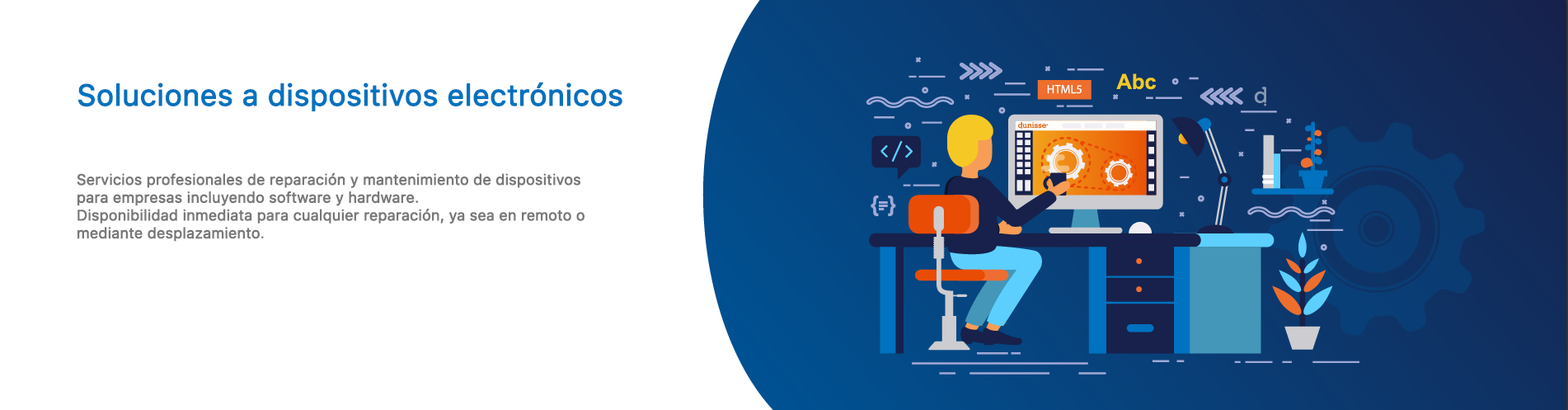
<style>
.page{position:relative;width:1568px;height:410px;background:#ffffff}
.page>*{position:absolute;margin:0}
.t1{font:29.7px "SFProText-Regular";color:#0072bf;font-weight:bold}
.t2{font:14.8px "SFProText-Regular";color:#787878;font-weight:bold}
</style>
<div class="page">
<p class="t1" style="left:78px;top:82px;width:544px;height:29px">Soluciones a dispositivos electrónicos</p>
<p class="t2" style="left:77px;top:172px;width:507px;height:70px">Servicios profesionales de reparación y mantenimiento de dispositivos <br>para empresas incluyendo software y hardware. <br>Disponibilidad inmediata para cualquier reparación, ya sea en remoto o <br>mediante desplazamiento.</p>
</div>
